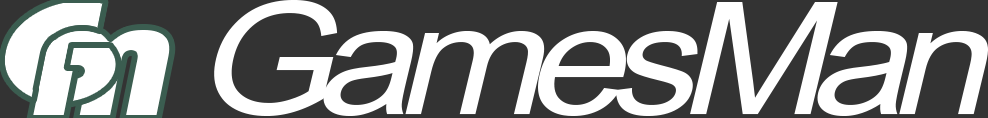
<style>
.page{position:relative;width:988px;height:118px;background:#333333}
.page>*{position:absolute;margin:0}
.t1{font:155px "Bauhaus93";letter-spacing:-0.079em;color:#ffffff;scale:1.34 1}
.t2{font:157px "ArialNarrow";letter-spacing:-0.079em;color:#ffffff;font-style:italic;scale:1.37 1}
.t3{font:136px "Bauhaus93";letter-spacing:-0.079em;color:#ffffff;scale:1.34 1}
</style>
<div class="page">
<p class="t1" style="left:1px;top:0px;width:118px;height:105px">G</p>
<p class="t2" style="left:214px;top:0px;width:774px;height:116px">GamesMan</p>
<p class="t3" style="left:29px;top:27px;width:144px;height:91px">M</p>
</div>
